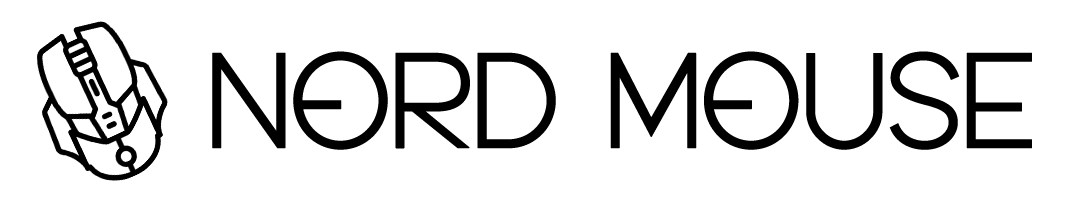
<style>
.page{position:relative;width:1080px;height:200px;background:#ffffff}
.page>*{position:absolute;margin:0}
.t1{font:139.4px "BonwickTypeface-Light";letter-spacing:-0.014em;color:#000000;font-weight:bold}
</style>
<div class="page">
<p class="t1" style="left:212px;top:51px;width:820px;height:99px">NORD MOUSE</p>
</div>
